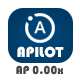
<style>
.page{position:relative;width:80px;height:80px;background:#ffffff}
.page>*{position:absolute;margin:0}
.t1{font:15px "Bauhaus93";color:#ffffff}
.t2{font:12px "Bauhaus93";color:#464646}
</style>
<div class="page">
<p class="t1" style="left:17px;top:46px;width:47px;height:12px">APILOT</p>
<p class="t2" style="left:16px;top:65px;width:47px;height:10px">AP 0.00x</p>
</div>
